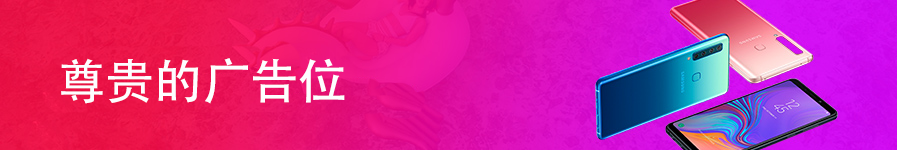
<style>
.page{position:relative;width:897px;height:150px}
.page>*{position:absolute;margin:0}
.t1{font:48px "AdobeHeitiStd-Regular";letter-spacing:0.005em;color:#fdfdff}
</style>
<div class="page">
<p class="t1" style="left:61px;top:58px;width:284px;height:46px">尊贵的广告位</p>
</div>
